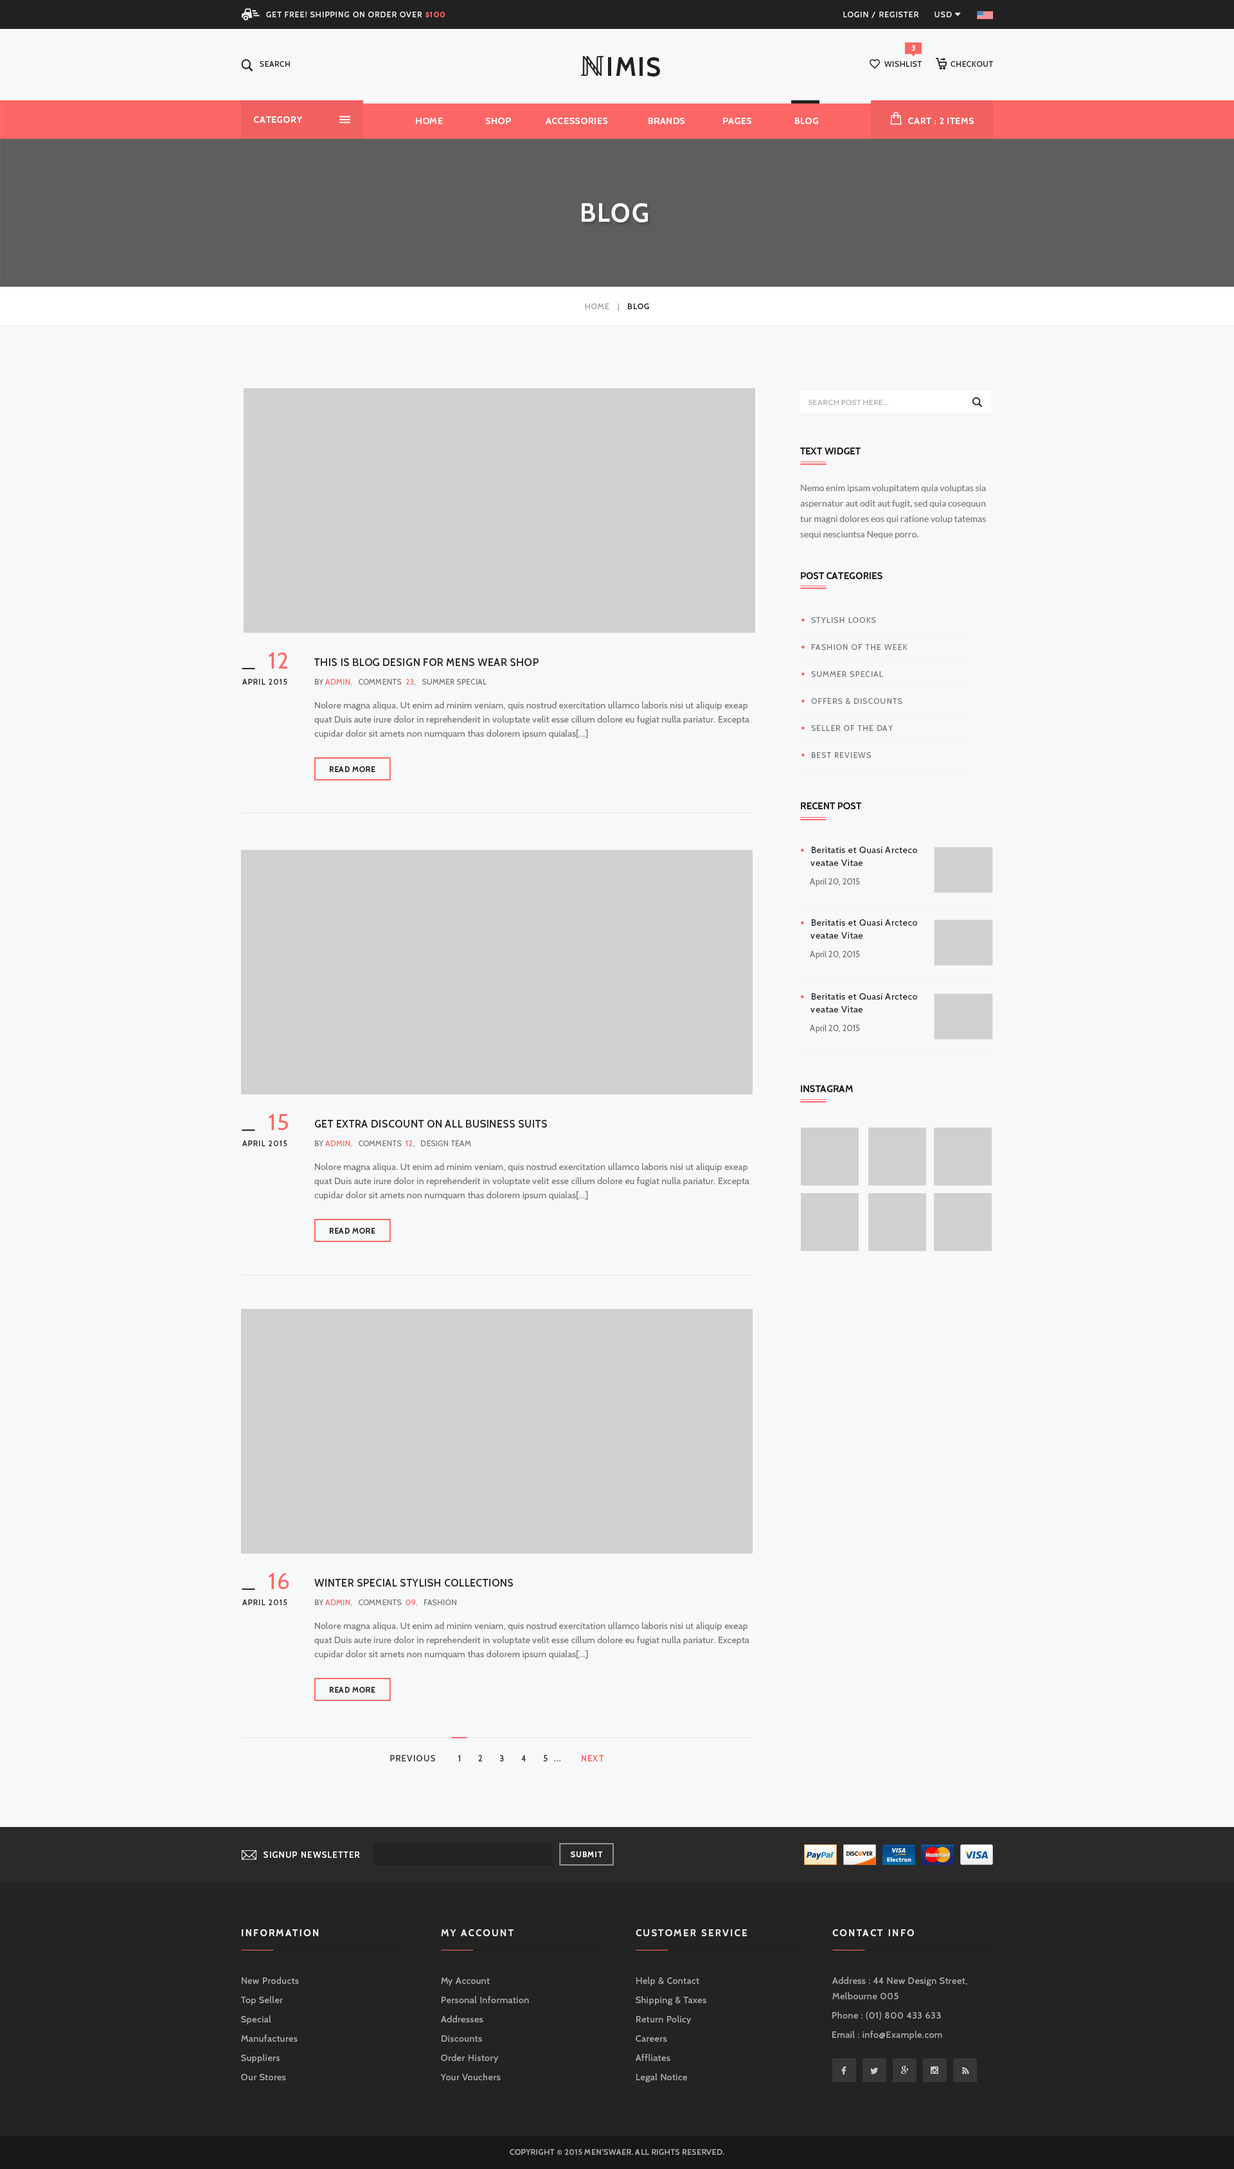
<style>
.page{position:relative;width:1234px;height:2169px;background:#f7f8f9}
.page>*{position:absolute;margin:0}
.t1{font:7.7px "Cabin-Medium";letter-spacing:0.1em;color:#e8e8e8;text-transform:uppercase}
.t2{font:7.7px "Cabin-Bold";letter-spacing:0.1em;color:#ff6766;text-transform:uppercase}
.t3{font:7.7px "Cabin-SemiBold";letter-spacing:0.05em;color:#ffffff;text-transform:uppercase}
.t4{font:7.7px "Cabin-Medium";letter-spacing:0.05em;color:#212121;text-transform:uppercase}
.t5{font:25.7px "Cabin-Bold";letter-spacing:0.05em;color:#212121;text-transform:uppercase}
.t6{font:9px "Cabin-Bold";letter-spacing:0.05em;color:#ffffff;text-transform:uppercase}
.t7{font:9px "Cabin-Bold";letter-spacing:0.05em;color:#f7f8f9;text-transform:uppercase}
.t8{font:25.7px "Cabin-Bold";letter-spacing:0.05em;color:#f7f8f9;text-transform:uppercase}
.t9{font:7.7px "Cabin-Regular";letter-spacing:0.1em;color:#999999;text-transform:uppercase}
.t10{font:7.7px "Cabin-SemiBold";letter-spacing:0.1em;color:#212121;text-transform:uppercase}
.t11{font:7.7px "Lato-Regular";letter-spacing:0.02em;color:#aaaaaa;text-transform:uppercase}
.t12{font:9.6px "Cabin-Bold";color:#111111}
.t13{font:9px/15.4px "Lato-Regular";color:#777777}
.t14{font:7.7px "Cabin-Regular";letter-spacing:0.1em;color:#777777;text-transform:uppercase}
.t15{font:22.5px "Cabin-Regular";letter-spacing:0.05em;color:#ff6766}
.t16{font:10.3px "Cabin-SemiBold";letter-spacing:0.03em;color:#212121;text-transform:uppercase}
.t17{font:7.7px "Cabin-Medium";letter-spacing:0.1em;color:#232323;text-transform:uppercase}
.t18{font:7.7px "Cabin-Regular";letter-spacing:0.03em;color:#777777;text-transform:uppercase}
.t19{font:7.7px "Cabin-Regular";letter-spacing:0.03em;color:#ff6766;text-transform:uppercase}
.t20{font:7.7px "Cabin-Regular";letter-spacing:0.03em;color:#2196f3;text-transform:uppercase}
.t21{font:9px/14.1px "Cabin-Regular";letter-spacing:0.02em;color:#777777}
.t22{font:7.7px "Cabin-Bold";letter-spacing:0.05em;color:#232323;text-transform:uppercase}
.t23{font:9px/12.9px "Cabin-Regular";letter-spacing:0.05em;color:#232323}
.t24{font:8.4px "Cabin-Regular";color:#777777}
.t25{font:8.4px "Cabin-Medium";letter-spacing:0.1em;color:#333333;text-transform:uppercase}
.t26{font:8.4px "Cabin-SemiBold";letter-spacing:0.1em;color:#ff6766;text-transform:uppercase}
.t27{font:8.4px "Cabin-Medium";letter-spacing:0.1em;color:#ffffff;text-transform:uppercase}
.t28{font:7.7px "Cabin-SemiBold";letter-spacing:0.1em;color:#ffffff;text-transform:uppercase}
.t29{font:9.6px "Cabin-Bold";letter-spacing:0.15em;color:#eeeeee;text-transform:uppercase}
.t30{font:9.6px "Cabin-Bold";letter-spacing:0.15em;color:#e8e8e8;text-transform:uppercase}
.t31{font:9px "Cabin-Regular";letter-spacing:0.05em;color:#aaaaaa}
.t32{font:9px/15.4px "Cabin-Regular";letter-spacing:0.05em;color:#aaaaaa}
.t33{font:7.7px "Cabin-Medium";letter-spacing:0.05em;color:#aaaaaa;text-transform:uppercase}
</style>
<div class="page">
<p class="t1" style="left:266px;top:12px;width:179px;height:6px">get free! shipping on order over <span class="t2">$100</span></p>
<p class="t1" style="left:843px;top:12px;width:76px;height:6px">login / register</p>
<p class="t3" style="left:912px;top:45px;width:3px;height:6px">3</p>
<p class="t4" style="left:260px;top:61px;width:30px;height:6px">search</p>
<p class="t5" style="left:608px;top:57px;width:52px;height:19px">imis</p>
<p class="t4" style="left:885px;top:61px;width:37px;height:6px">wishlist</p>
<p class="t4" style="left:951px;top:61px;width:42px;height:6px">checkout</p>
<p class="t6" style="left:254px;top:116px;width:48px;height:7px">category</p>
<p class="t6" style="left:416px;top:118px;width:402px;height:6px"><span class="t7">home  </span>               shop              accessories                brands               pages                 Blog</p>
<p class="t6" style="left:908px;top:118px;width:66px;height:6px">cart : 2 items</p>
<p class="t8" style="left:582px;top:203px;width:66px;height:19px">blog</p>
<p class="t9" style="left:585px;top:303px;width:64px;height:8px">home   |  <span class="t10"> blog</span></p>
<p class="t11" style="left:809px;top:400px;width:79px;height:5px">search post HERE...</p>
<p class="t12" style="left:800px;top:447px;width:61px;height:8px">TEXT WIDGET</p>
<p class="t13" style="left:800px;top:485px;width:186px;height:54px">Nemo enim ipsam volupitatem quia voluptas sia aspernatur aut odit aut fugit, sed quia cosequun tur magni dolores eos qui ratione volup tatemas sequi nesciuntsa Neque porro.</p>
<p class="t12" style="left:801px;top:572px;width:82px;height:7px">POST CATEGORIES</p>
<p class="t14" style="left:811px;top:617px;width:65px;height:6px">Stylish Looks</p>
<p class="t15" style="left:269px;top:652px;width:19px;height:17px">12</p>
<p class="t14" style="left:812px;top:644px;width:96px;height:6px">Fashion Of the week</p>
<p class="t16" style="left:314px;top:658px;width:225px;height:8px">this is blog design for mens wear shop</p>
<p class="t14" style="left:811px;top:671px;width:72px;height:6px">Summer Special</p>
<p class="t17" style="left:242px;top:679px;width:45px;height:6px">April 2015</p>
<p class="t18" style="left:315px;top:679px;width:172px;height:6px">By <span class="t19">Admin</span><span class="t20">,   </span>comments <span class="t19"> 23</span><span class="t20">,   </span>summer special</p>
<p class="t21" style="left:314px;top:701px;width:436px;height:38px">Nolore magna aliqua. Ut enim ad minim veniam, quis nostrud exercitation ullamco laboris nisi ut aliquip exeap <br>quat Duis aute irure dolor in reprehenderit in voluptate velit esse cillum dolore eu fugiat nulla pariatur. Excepta<br>cupidar dolor sit amets non numquam thas dolorem ipsum quialas[...]</p>
<p class="t14" style="left:811px;top:698px;width:92px;height:7px">Offers &amp; Discounts</p>
<p class="t14" style="left:811px;top:725px;width:83px;height:6px">Seller of the day</p>
<p class="t14" style="left:812px;top:752px;width:59px;height:6px">Best reviews</p>
<p class="t22" style="left:330px;top:766px;width:45px;height:6px">Read more</p>
<p class="t12" style="left:801px;top:802px;width:61px;height:7px">RECENT POST</p>
<p class="t23" style="left:811px;top:847px;width:106px;height:19px">Beritatis et Quasi Arcteco<br>veatae Vitae</p>
<p class="t24" style="left:810px;top:878px;width:50px;height:9px">April 20, 2015</p>
<p class="t23" style="left:811px;top:919px;width:106px;height:20px">Beritatis et Quasi Arcteco<br>veatae Vitae</p>
<p class="t24" style="left:810px;top:951px;width:50px;height:8px">April 20, 2015</p>
<p class="t23" style="left:811px;top:993px;width:106px;height:20px">Beritatis et Quasi Arcteco<br>veatae Vitae</p>
<p class="t24" style="left:810px;top:1025px;width:50px;height:8px">April 20, 2015</p>
<p class="t12" style="left:801px;top:1085px;width:52px;height:7px">INSTAGRAM</p>
<p class="t15" style="left:269px;top:1114px;width:19px;height:16px">15</p>
<p class="t16" style="left:315px;top:1120px;width:232px;height:8px">get extra discount on all business suits</p>
<p class="t17" style="left:242px;top:1140px;width:45px;height:6px">April 2015</p>
<p class="t18" style="left:315px;top:1140px;width:156px;height:7px">By <span class="t19">Admin</span><span class="t20">,   </span>comments <span class="t19"> 12</span><span class="t20">,   </span>Design Team</p>
<p class="t21" style="left:314px;top:1163px;width:436px;height:37px">Nolore magna aliqua. Ut enim ad minim veniam, quis nostrud exercitation ullamco laboris nisi ut aliquip exeap <br>quat Duis aute irure dolor in reprehenderit in voluptate velit esse cillum dolore eu fugiat nulla pariatur. Excepta<br>cupidar dolor sit amets non numquam thas dolorem ipsum quialas[...]</p>
<p class="t22" style="left:330px;top:1228px;width:45px;height:6px">Read more</p>
<p class="t15" style="left:269px;top:1573px;width:20px;height:16px">16</p>
<p class="t16" style="left:314px;top:1579px;width:199px;height:8px">winter special stylish collections</p>
<p class="t17" style="left:242px;top:1599px;width:45px;height:6px">April 2015</p>
<p class="t18" style="left:315px;top:1599px;width:141px;height:7px">By <span class="t19">Admin</span><span class="t20">,   </span>comments <span class="t19"> 09</span><span class="t20">,   </span>Fashion</p>
<p class="t21" style="left:314px;top:1622px;width:436px;height:37px">Nolore magna aliqua. Ut enim ad minim veniam, quis nostrud exercitation ullamco laboris nisi ut aliquip exeap <br>quat Duis aute irure dolor in reprehenderit in voluptate velit esse cillum dolore eu fugiat nulla pariatur. Excepta<br>cupidar dolor sit amets non numquam thas dolorem ipsum quialas[...]</p>
<p class="t22" style="left:330px;top:1687px;width:45px;height:6px">Read more</p>
<p class="t25" style="left:390px;top:1755px;width:214px;height:6px">Previous        1      2      3      4      5  ...       <span class="t26">next</span></p>
<p class="t27" style="left:264px;top:1851px;width:96px;height:7px">signup newsletter</p>
<p class="t28" style="left:571px;top:1851px;width:31px;height:6px">Submit</p>
<p class="t29" style="left:242px;top:1929px;width:77px;height:7px">information</p>
<p class="t30" style="left:441px;top:1929px;width:73px;height:7px">my account</p>
<p class="t30" style="left:636px;top:1929px;width:112px;height:7px">customer service</p>
<p class="t30" style="left:833px;top:1929px;width:81px;height:7px">contact Info</p>
<p class="t31" style="left:242px;top:1977px;width:57px;height:7px">New Products</p>
<p class="t31" style="left:441px;top:1977px;width:49px;height:9px">My Account</p>
<p class="t31" style="left:636px;top:1977px;width:63px;height:9px">Help &amp; Contact</p>
<p class="t32" style="left:833px;top:1977px;width:135px;height:22px">Address : 44 New Design Street,<br>Melbourne 005</p>
<p class="t31" style="left:241px;top:1996px;width:42px;height:9px">Top Seller</p>
<p class="t31" style="left:442px;top:1996px;width:87px;height:7px">Personal Information</p>
<p class="t31" style="left:636px;top:1996px;width:70px;height:9px">Shipping &amp; Taxes</p>
<p class="t31" style="left:241px;top:2015px;width:30px;height:9px">Special</p>
<p class="t31" style="left:441px;top:2015px;width:42px;height:7px">Addresses</p>
<p class="t31" style="left:636px;top:2015px;width:55px;height:9px">Return Policy</p>
<p class="t31" style="left:833px;top:2012px;width:108px;height:8px">Phone : (01) 800 433 633</p>
<p class="t31" style="left:833px;top:2031px;width:109px;height:9px">Email : info@Example.com</p>
<p class="t31" style="left:241px;top:2035px;width:57px;height:7px">Manufactures</p>
<p class="t31" style="left:442px;top:2035px;width:40px;height:7px">Discounts</p>
<p class="t31" style="left:636px;top:2035px;width:31px;height:7px">Careers</p>
<p class="t31" style="left:241px;top:2054px;width:39px;height:9px">Suppliers</p>
<p class="t31" style="left:441px;top:2054px;width:57px;height:9px">Order History</p>
<p class="t31" style="left:636px;top:2054px;width:34px;height:7px">Affliates</p>
<p class="t31" style="left:241px;top:2074px;width:45px;height:6px">Our Stores</p>
<p class="t31" style="left:440px;top:2073px;width:61px;height:7px">Your Vouchers</p>
<p class="t31" style="left:636px;top:2073px;width:51px;height:9px">Legal Notice</p>
<p class="t33" style="left:510px;top:2149px;width:214px;height:6px">Copyright © 2015 Men’swaer. All Rights Reserved.</p>
</div>
